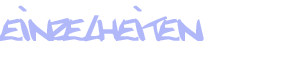
<style>
.page{position:relative;width:300px;height:60px;background:#ffffff}
.page>*{position:absolute;margin:0}
.t1{font:60px "Texted'critureLanfeust";color:#b0b8f9}
</style>
<div class="page">
<p class="t1" style="left:0px;top:5px;width:204px;height:37px">einzelheiten</p>
</div>
